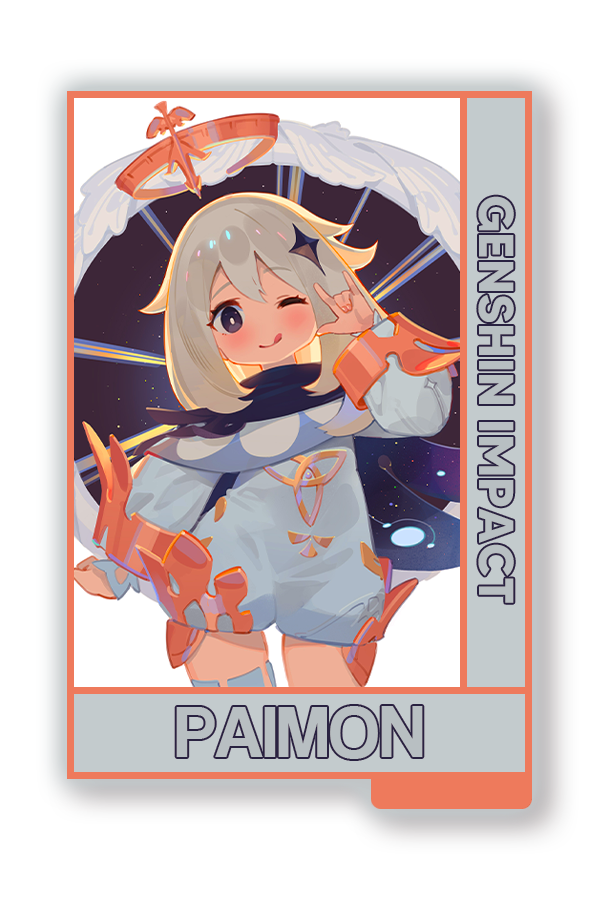
<style>
.page{position:relative;width:600px;height:900px;background:#ffffff}
.page>*{position:absolute;margin:0}
.t1{font:48.8px "MADETOMMY-Bold";color:#c2d1d2}
.t2{font:75px "CoolveticaRg-Regular";color:#c2d1d2}
</style>
<div class="page">
<p class="t1" style="left:478px;top:196px;width:36px;height:407px;rotate:90deg">GENSHIN IMPACT</p>
<p class="t2" style="left:176px;top:706px;width:247px;height:53px">PAIMON</p>
</div>
